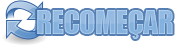
<style>
.page{position:relative;width:180px;height:46px;background:#ffffff}
.page>*{position:absolute;margin:0}
.t1{font:30px "Impact";letter-spacing:-0.025em;color:#85b1de}
</style>
<div class="page">
<p class="t1" style="left:37px;top:10px;width:136px;height:29px">RECOMEÇAR</p>
</div>
